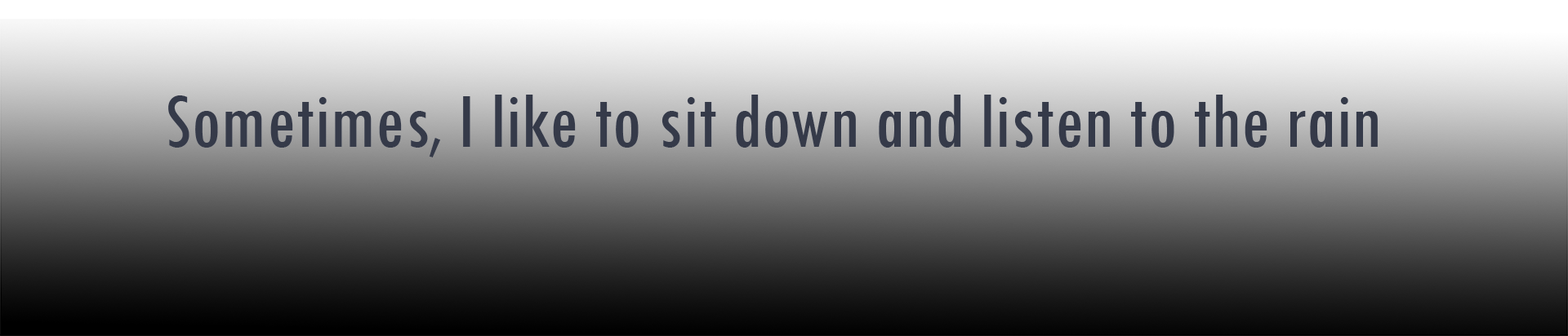
<style>
.page{position:relative;width:1568px;height:336px}
.page>*{position:absolute;margin:0}
.t1{font:81.7px "TwCenMT-Condensed";color:#353a49}
</style>
<div class="page">
<p class="t1" style="left:168px;top:95px;width:1210px;height:63px">Sometimes, I like to sit down and listen to the rain</p>
<p class="t1" style="left:169px;top:91px;width:1210px;height:63px">Sometimes, I like to sit down and listen to the rain</p>
</div>
